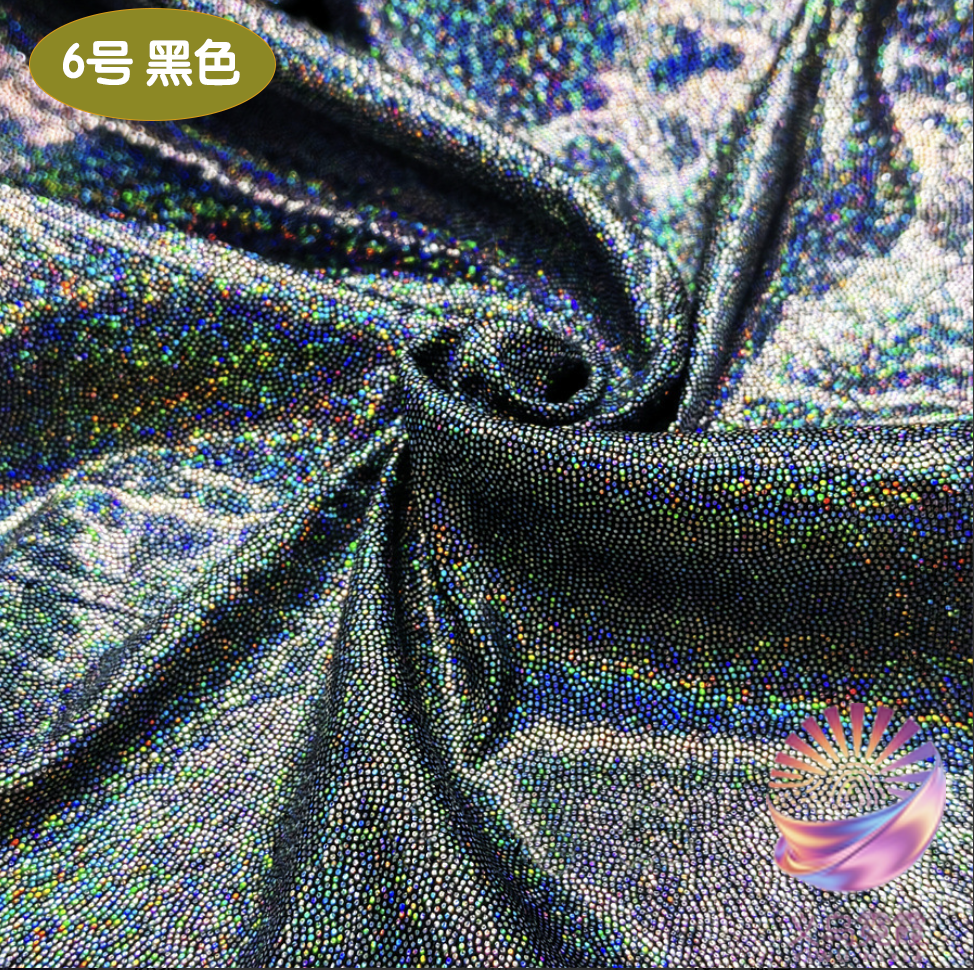
<style>
.page{position:relative;width:974px;height:970px}
.page>*{position:absolute;margin:0}
.t1{font:49.1px "STYuanti-SC-Bold";color:#ffffff;scale:0.97 1}
.t2{font:84.6px "STBaoliSC-Regular";color:#ffffff;scale:0.97 1}
</style>
<div class="page">
<p class="t1" style="left:63px;top:38px;width:177px;height:49px"><span class="t2">         </span>6号 黑色</p>
</div>
